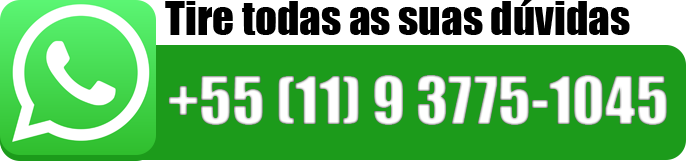
<style>
.page{position:relative;width:686px;height:161px;background:#1c9b1b}
.page>*{position:absolute;margin:0}
.t1{font:43px "Impact";color:#000000}
.t2{font:61.5px "Impact";color:#ffffff}
</style>
<div class="page">
<p class="t1" style="left:165px;top:0px;width:465px;height:35px">Tire todas as suas dúvidas</p>
<p class="t2" style="left:168px;top:75px;width:499px;height:50px">+55 (11) 9 3775-1045</p>
</div>
